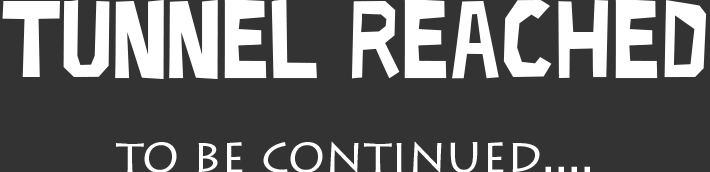
<style>
.page{position:relative;width:710px;height:172px;background:#333333}
.page>*{position:absolute;margin:0}
.t1{font:48px/47.2px "LithosPro-Regular";color:#ffffff}
.t2{font:111.1px/47.2px "LIMBO";color:#ffffff}
</style>
<div class="page">
<p class="t1" style="left:2px;top:0px;width:705px;height:173px;text-align:center"><span class="t2">Tunnel reached<br><br></span>to be continued....</p>
</div>
